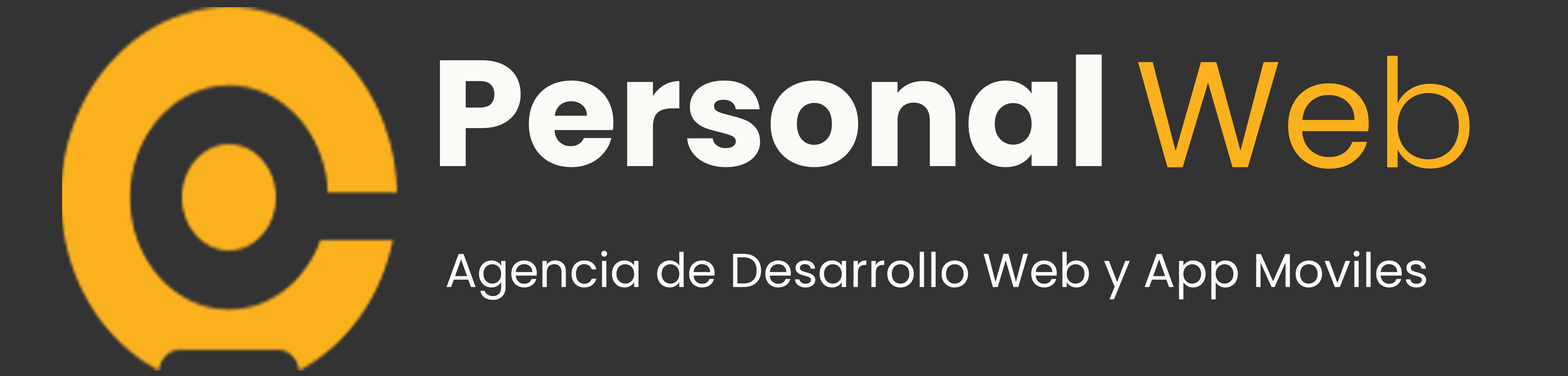
<style>
.page{position:relative;width:1568px;height:376px;background:#333333}
.page>*{position:absolute;margin:0}
.t1{font:150.8px "Poppins-Bold";color:#fcfaf6}
.t2{font:150.8px "Poppins-Regular";color:#fbb11d}
.t3{font:150.8px "Poppins-Light";color:#fbb11d}
.t4{font:47.7px "Poppins-Regular";color:#fbfbfa}
</style>
<div class="page">
<p class="t1" style="left:440px;top:55px;width:662px;height:112px">Personal</p>
<p class="t2" style="left:1138px;top:56px;width:332px;height:113px">We<span class="t3">b</span></p>
<p class="t4" style="left:447px;top:251px;width:979px;height:49px">Agencia de Desarrollo Web y App Moviles</p>
</div>
